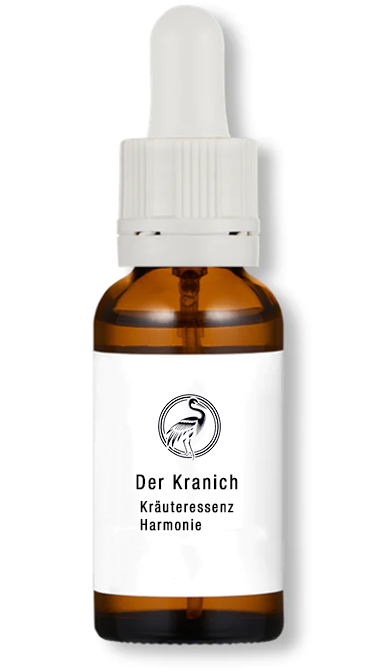
<style>
.page{position:relative;width:380px;height:670px;background:#ffffff}
.page>*{position:absolute;margin:0}
.t1{font:20.3px "HelveticaNeueLTPro-Cn";letter-spacing:0.1em;color:#000000;font-weight:bold;scale:0.9 1}
.t2{font:15.2px "HelveticaNeueLTPro-Cn";letter-spacing:0.1em;color:#000000;font-weight:bold;scale:0.9 1}
</style>
<div class="page">
<p class="t1" style="left:136px;top:474px;width:102px;height:16px">Der Kranich</p>
<p class="t2" style="left:140px;top:500px;width:94px;height:31px">Kräuteressenz<br>Harmonie</p>
</div>
